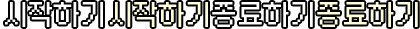
<style>
.page{position:relative;width:420px;height:29px;background:#ffffff}
.page>*{position:absolute;margin:0}
.t1{font:30px "morris9";letter-spacing:-0.025em;color:#eeeeee}
</style>
<div class="page">
<p class="t1" style="left:5px;top:2px;width:98px;height:25px">시작하기</p>
<p class="t1" style="left:110px;top:2px;width:98px;height:25px">시작하기</p>
<p class="t1" style="left:212px;top:2px;width:101px;height:25px">종료하기</p>
<p class="t1" style="left:317px;top:2px;width:101px;height:25px">종료하기</p>
</div>
